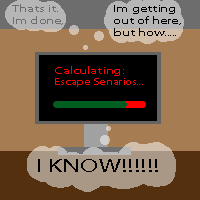
<style>
.page{position:relative;width:200px;height:200px;background:#a67c52}
.page>*{position:absolute;margin:0}
.t1{font:10px "MyriadPro-Regular";color:#6d6d6d;scale:1.5 1}
.t2{font:10px "MyriadPro-Regular";color:#000000;scale:1.5 1}
.t3{font:9px "MyriadPro-Regular";color:#ff0101;scale:1.41 1}
.t4{font:10px "MyriadPro-Regular";color:#ff0101;scale:1.5 1}
.t5{font:18px "MyriadPro-Regular";color:#000000;scale:1.5 1}
</style>
<div class="page">
<p class="t1" style="left:12px;top:4px;width:51px;height:21px">Thats it.<br>Im done,</p>
<p class="t2" style="left:114px;top:5px;width:67px;height:31px">Im getting out of here, but how.....</p>
<p class="t3" style="left:55px;top:66px;width:88px;height:21px"><span class="t4">Calculating:<br></span>Escape Senarios...</p>
<p class="t5" style="left:38px;top:159px;width:120px;height:13px">I KNOW!!!!!!</p>
</div>
